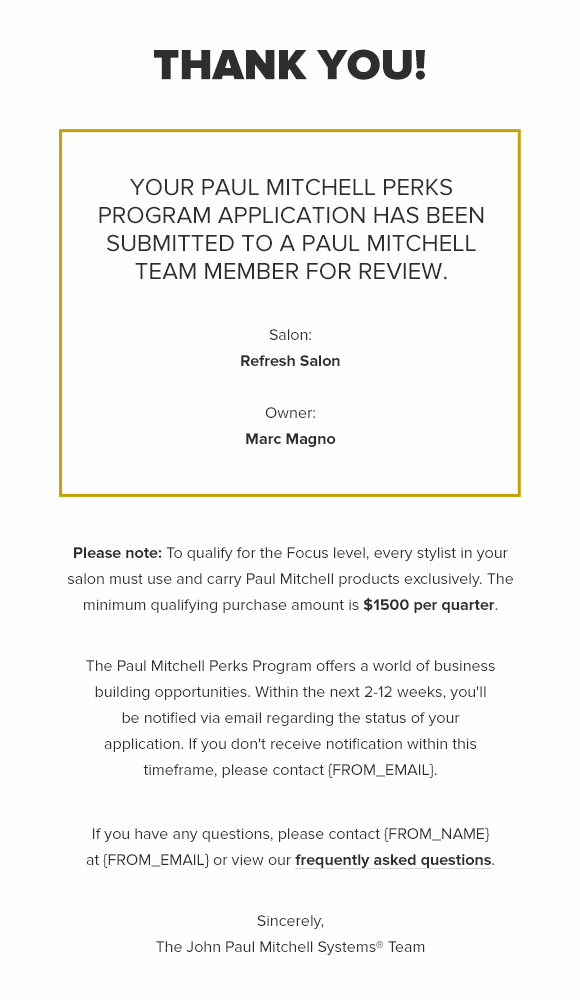
<style>
.page{position:relative;width:580px;height:1000px;background:#fffefe}
.page>*{position:absolute;margin:0}
.t1{font:44px "ProximaNova-Black";color:#2e2e2e;text-transform:uppercase}
.t2{font:24px/28px "ProximaNova-Regular";color:#2e2e2e;text-transform:uppercase}
.t3{font:16px/26px "ProximaNova-Bold";color:#2e2e2e}
.t4{font:16px/26px "ProximaNova-Regular";color:#2e2e2e}
.t5{font:16px/26px "ProximaNova-Bold";color:#2e2e2e;text-decoration:underline}
</style>
<div class="page">
<p class="t1" style="left:154px;top:49px;width:271px;height:31px">Thank you!</p>
<p class="t2" style="left:99px;top:178px;width:385px;height:102px;text-align:center">Your Paul Mitchell Perks Program application has been submitted to a Paul Mitchell team member for review.</p>
<p class="t3" style="left:241px;top:329px;width:99px;height:118px;text-align:center"><span class="t4">Salon:<br></span>Refresh Salon<br><span class="t4"><br>Owner:<br></span>Marc Magno</p>
<p class="t4" style="left:67px;top:547px;width:446px;height:66px;text-align:center"><span class="t3">Please note:</span> To qualify for the Focus level, every stylist in your salon must use and carry Paul Mitchell products exclusively. The minimum qualifying purchase amount is <span class="t3">$1500 per quarter</span>.</p>
<p class="t4" style="left:86px;top:660px;width:409px;height:118px;text-align:center">The Paul Mitchell Perks Program offers a world of business building opportunities. Within the next 2-12 weeks, you'll be notified via email regarding the status of your application. If you don't receive notification within this timeframe, please contact {FROM_EMAIL}.</p>
<p class="t4" style="left:86px;top:827px;width:408px;height:42px;text-align:center">If you have any questions, please contact {FROM_NAME} at {FROM_EMAIL} or view our <span class="t5">frequently asked questions</span>.</p>
<p class="t4" style="left:156px;top:915px;width:269px;height:40px;text-align:center">Sincerely,<br>The John Paul Mitchell Systems® Team</p>
</div>
